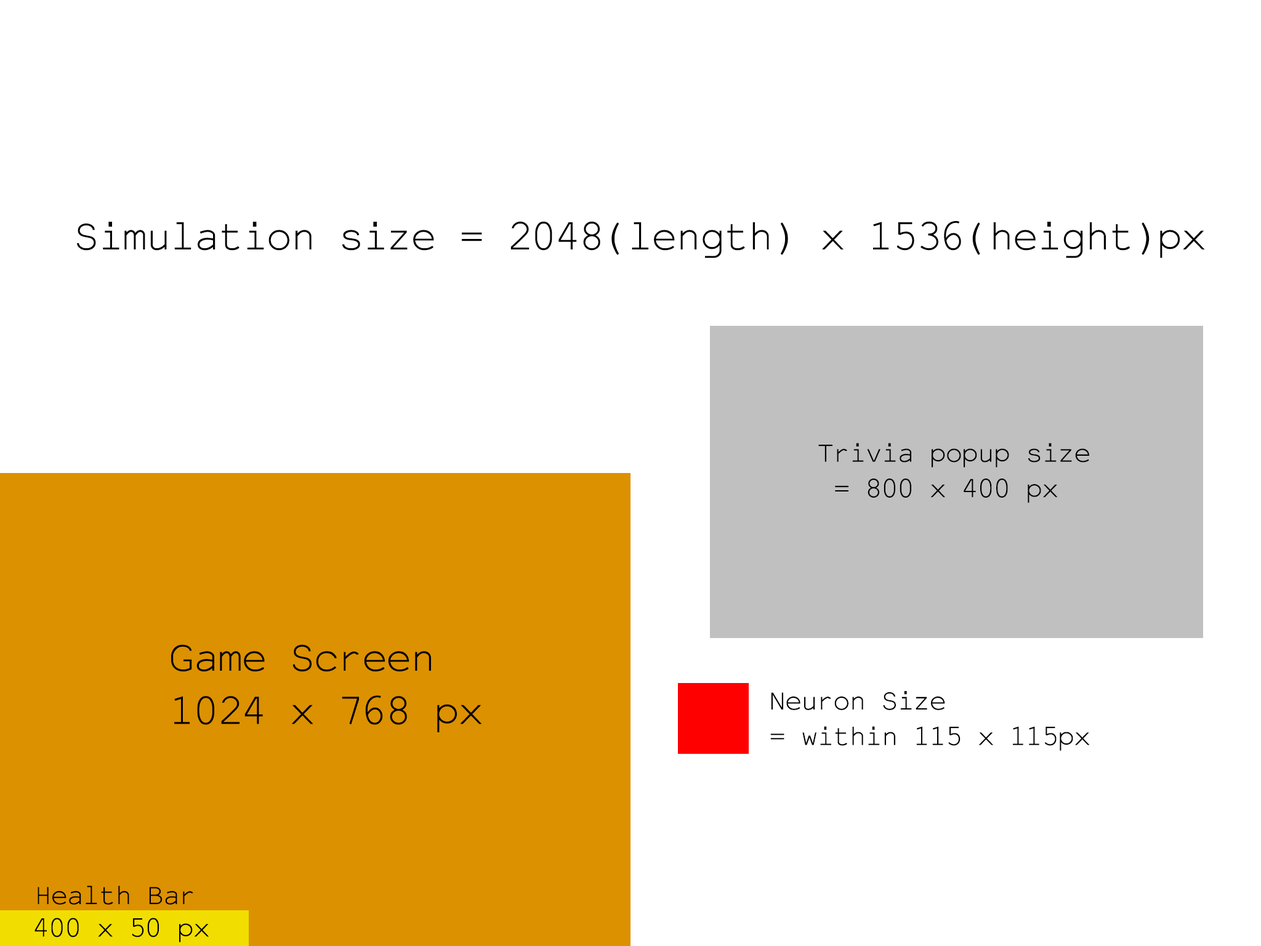
<style>
.page{position:relative;width:1261px;height:946px;background:#ffffff}
.page>*{position:absolute;margin:0}
.t1{font:44.3px "AnjalArulMathi";color:#000000}
.t2{font:29.6px "AnjalArulMathi";color:#000000}
</style>
<div class="page">
<p class="t1" style="left:77px;top:220px;width:1128px;height:38px">Simulation size = 2048(length) x 1536(height)px</p>
<p class="t2" style="left:818px;top:443px;width:271px;height:60px">Trivia popup size<br> = 800 x 400 px</p>
<p class="t1" style="left:171px;top:644px;width:311px;height:88px">Game Screen<br>1024 x 768 px</p>
<p class="t2" style="left:770px;top:691px;width:320px;height:60px">Neuron Size <br>= within 115 x 115px</p>
<p class="t2" style="left:38px;top:885px;width:155px;height:19px">Health Bar</p>
<p class="t2" style="left:34px;top:917px;width:175px;height:25px">400 x 50 px</p>
</div>
